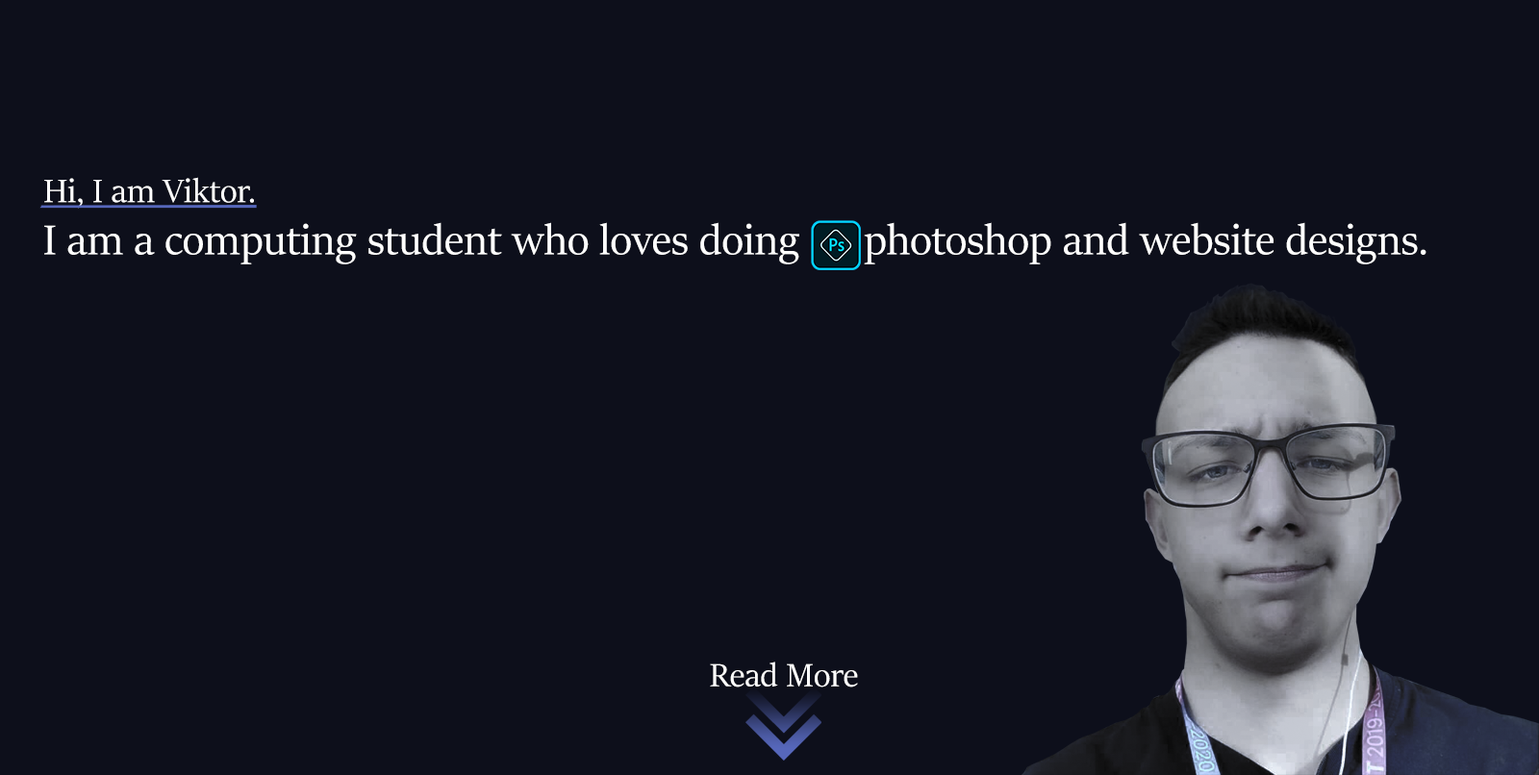
<style>
.page{position:relative;width:1539px;height:775px;background:#0d0f1b}
.page>*{position:absolute;margin:0}
.t1{font:36.6px "SitkaBanner";color:#ffffff}
.t2{font:46.9px "SitkaBanner";color:#ffffff}
.t3{font:36.4px "SitkaBanner";color:#ffffff}
</style>
<div class="page">
<p class="t1" style="left:44px;top:177px;width:210px;height:32px">Hi, I am Viktor.</p>
<p class="t2" style="left:44px;top:222px;width:1382px;height:42px">I am a computing student who loves doing      photoshop and website designs.</p>
<p class="t3" style="left:710px;top:662px;width:148px;height:26px">Read More</p>
</div>
